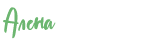
<style>
.page{position:relative;width:160px;height:46px;background:#ffffff}
.page>*{position:absolute;margin:0}
.t1{font:30.1px "PinkMouseScript-Regular";color:#6cb670}
</style>
<div class="page">
<p class="t1" style="left:3px;top:7px;width:53px;height:32px">Алена</p>
</div>
